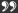
<style>
.page{position:relative;width:18px;height:13px;background:#333333}
.page>*{position:absolute;margin:0}
.t1{font:36px "GaramondStd-HandtooledBold";color:#ffffff}
</style>
<div class="page">
<p class="t1" style="left:1px;top:1px;width:16px;height:11px;rotate:180deg">“</p>
</div>
